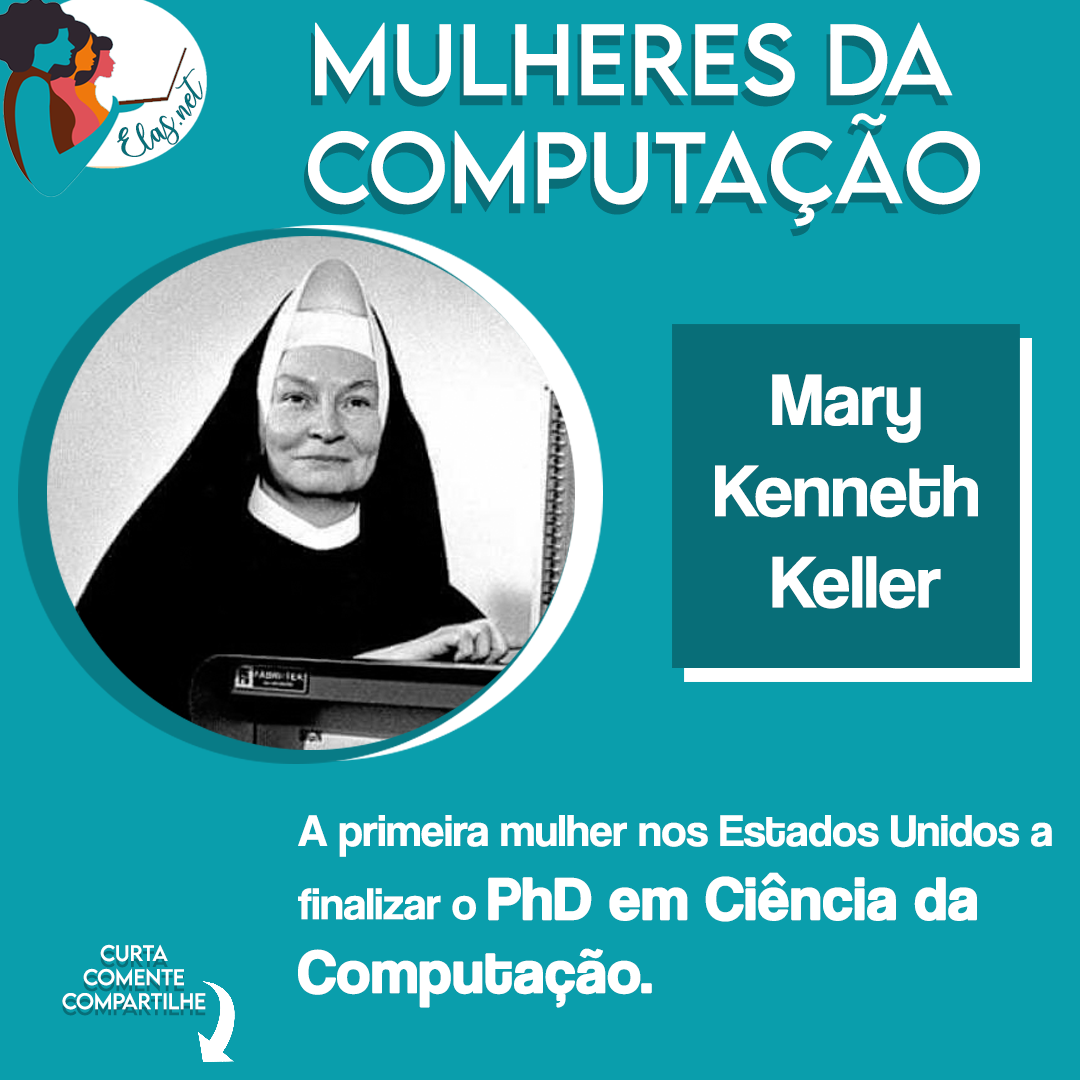
<style>
.page{position:relative;width:1080px;height:1080px;background:#0a9eac}
.page>*{position:absolute;margin:0}
.t1{font:90px "LEMONMILK-Regular";color:#ffffff}
.t2{font:25px "charlinda-Regular";color:#086e78;scale:1.18 1}
.t3{font:76px "CoolveticaRg-Regular";color:#ffffff}
.t4{font:46px "CoolveticaRg-Regular";color:#ffffff}
.t5{font:61px "CoolveticaRg-Regular";color:#ffffff;font-weight:bold}
.t6{font:20px "LEMONMILK-Regular";color:#ffffff}
</style>
<div class="page">
<p class="t1" style="left:308px;top:22px;width:672px;height:205px;text-align:center">Mulheres da <br>Computação</p>
<p class="t2" style="left:117px;top:68px;width:86px;height:89px;rotate:-43deg">Elas.net</p>
<p class="t3" style="left:715px;top:374px;width:263px;height:235px;text-align:center">Mary <br>Kenneth <br>Keller</p>
<p class="t4" style="left:298px;top:815px;width:754px;height:193px">A primeira mulher nos Estados Unidos a <br>finalizar o <span class="t5">PhD em Ciência da <br>Computação.</span></p>
<p class="t6" style="left:62px;top:944px;width:144px;height:66px;text-align:center">Curta<br>Comente<br>Compartilhe</p>
</div>
